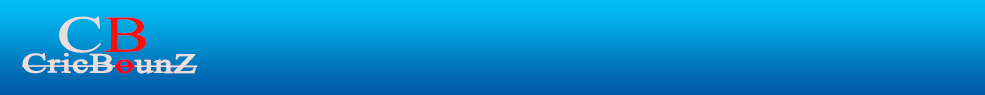
<style>
.page{position:relative;width:985px;height:95px}
.page>*{position:absolute;margin:0}
.t1{font:51.7px "TimesNewRomanPSMT";color:#e9dddd;font-variant:small-caps;scale:1.35 1}
.t2{font:51.7px "TimesNewRomanPSMT";color:#f70f0f;font-variant:small-caps;scale:1.35 1}
.t3{font:27.4px "TimesNewRomanPSMT";color:#e9dddd;font-weight:bold;scale:1.35 1}
.t4{font:27.4px "TimesNewRomanPSMT";color:#fe001e;font-weight:bold;scale:1.35 1}
</style>
<div class="page">
<p class="t1" style="left:59px;top:16px;width:88px;height:37px">C<span class="t2">B</span></p>
<p class="t3" style="left:22px;top:53px;width:176px;height:21px">CricB<span class="t4">o</span>unZ</p>
</div>
